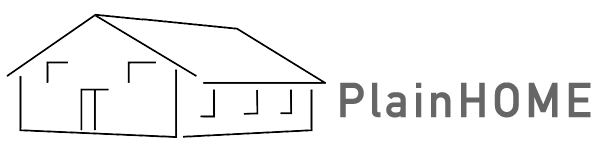
<style>
.page{position:relative;width:600px;height:150px;background:#ffffff}
.page>*{position:absolute;margin:0}
.t1{font:47.6px "DINAlternate-Bold";letter-spacing:0.05em;color:#666666;font-weight:bold}
</style>
<div class="page">
<p class="t1" style="left:340px;top:82px;width:251px;height:36px">PlainHOME</p>
</div>
